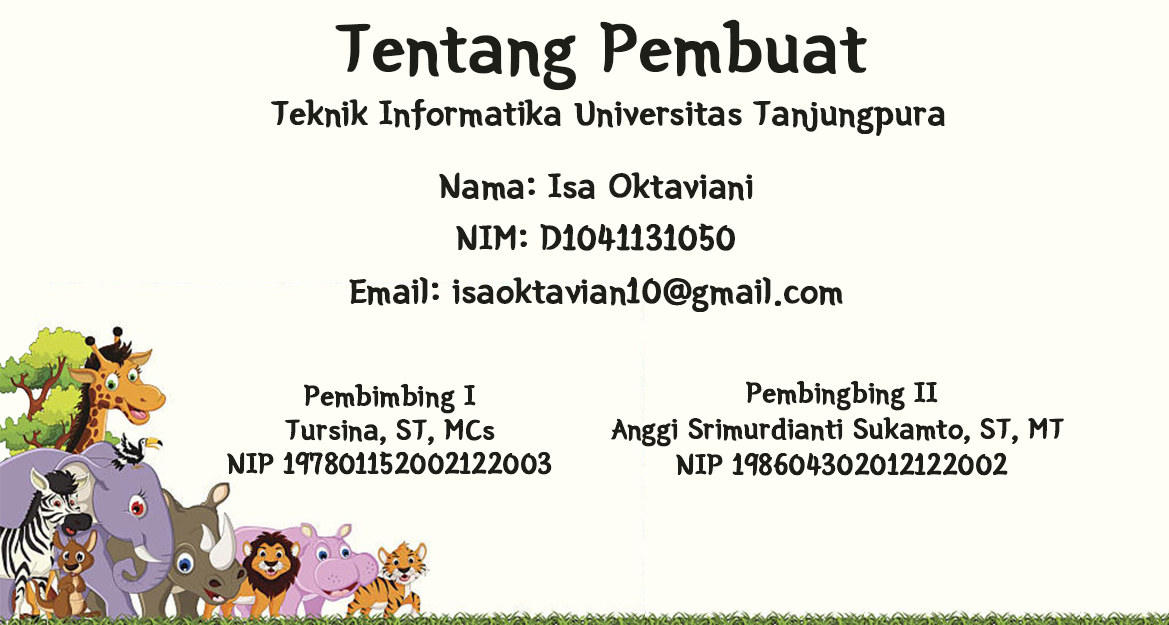
<style>
.page{position:relative;width:1169px;height:625px;background:#fefef6}
.page>*{position:absolute;margin:0}
.t1{font:36px/55.2px "BMYEONSUNG-OTF";color:#1e1e18;font-weight:bold}
.t2{font:72px/55.2px "BMYEONSUNG-OTF";color:#1e1e18;font-weight:bold}
.t3{font:36px/52.8px "BMYEONSUNG-OTF";color:#1e1e18;font-weight:bold}
.t4{font:30px/33.8px "BMYEONSUNG-OTF";color:#1e1e18;font-weight:bold}
.t5{font:30px/36px "BMYEONSUNG-OTF";color:#1e1e18;font-weight:bold}
</style>
<div class="page">
<p class="t1" style="left:271px;top:19px;width:674px;height:117px;text-align:center"><span class="t2">Tentang Pembuat <br></span>Teknik Informatika Universitas Tanjungpura</p>
<p class="t3" style="left:349px;top:172px;width:494px;height:140px;text-align:center">Nama: Isa Oktaviani<br>NIM: D1041131050<br>Email: isaoktavian10@gmail.com</p>
<p class="t4" style="left:227px;top:383px;width:325px;height:92px;text-align:center">Pembimbing I<br>Tursina, ST, MCs<br>NIP 197801152002122003</p>
<p class="t5" style="left:611px;top:380px;width:453px;height:96px;text-align:center">Pembingbing II<br>Anggi Srimurdianti Sukamto, ST, MT <br>NIP 198604302012122002</p>
</div>
